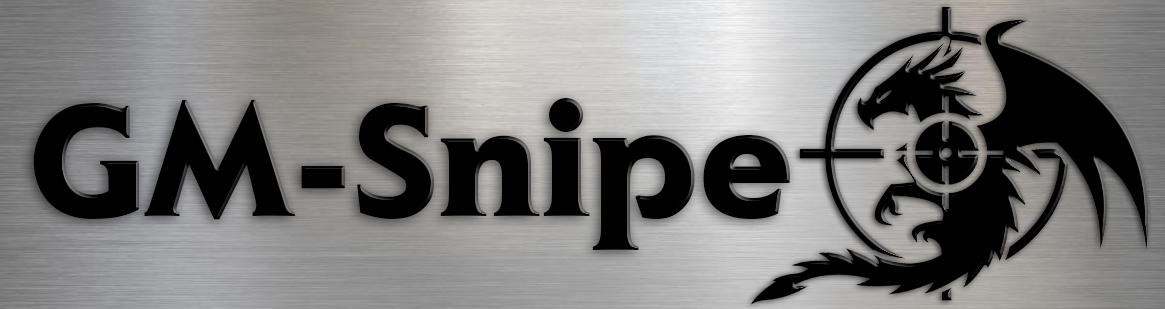
<style>
.page{position:relative;width:1165px;height:309px}
.page>*{position:absolute;margin:0}
.t1{font:164.4px "ElanITCStd-Black";color:#000000}
</style>
<div class="page">
<p class="t1" style="left:33px;top:98px;width:757px;height:152px">GM-Snipe</p>
</div>
